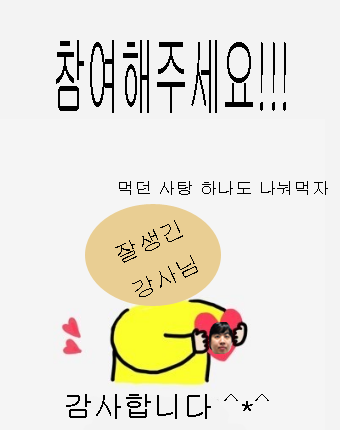
<style>
.page{position:relative;width:340px;height:430px;background:#f5f5f5}
.page>*{position:absolute;margin:0}
.t1{font:90px "Gulim";color:#000000;scale:0.38 1}
.t2{font:16.5px "Gulim";color:#000000;scale:1.07 1}
.t3{font:22.4px "Gulim";color:#000000;scale:1.1 1}
.t4{font:30px "Gulim";color:#000000}
</style>
<div class="page">
<p class="t1" style="left:56px;top:40px;width:230px;height:73px">참여해주세요!!!</p>
<p class="t2" style="left:119px;top:181px;width:209px;height:14px">먹던 사탕 하나도 나눠먹자</p>
<p class="t3" style="left:115px;top:220px;width:83px;height:77px;rotate:-25deg">잘생긴<br>강사님</p>
<p class="t4" style="left:66px;top:394px;width:203px;height:25px">감사합니다 ^*^</p>
</div>
